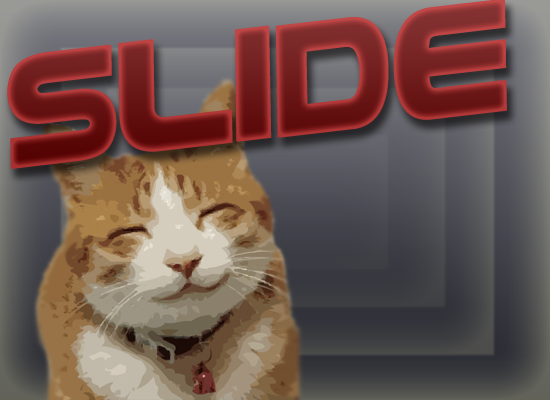
<style>
.page{position:relative;width:550px;height:400px}
.page>*{position:absolute;margin:0}
.t1{font:160px "!PEPSI!";font-weight:bold}
</style>
<div class="page">
<p class="t1" style="left:7px;top:0px;width:500px;height:169px;rotate:-7deg">Slide</p>
</div>
